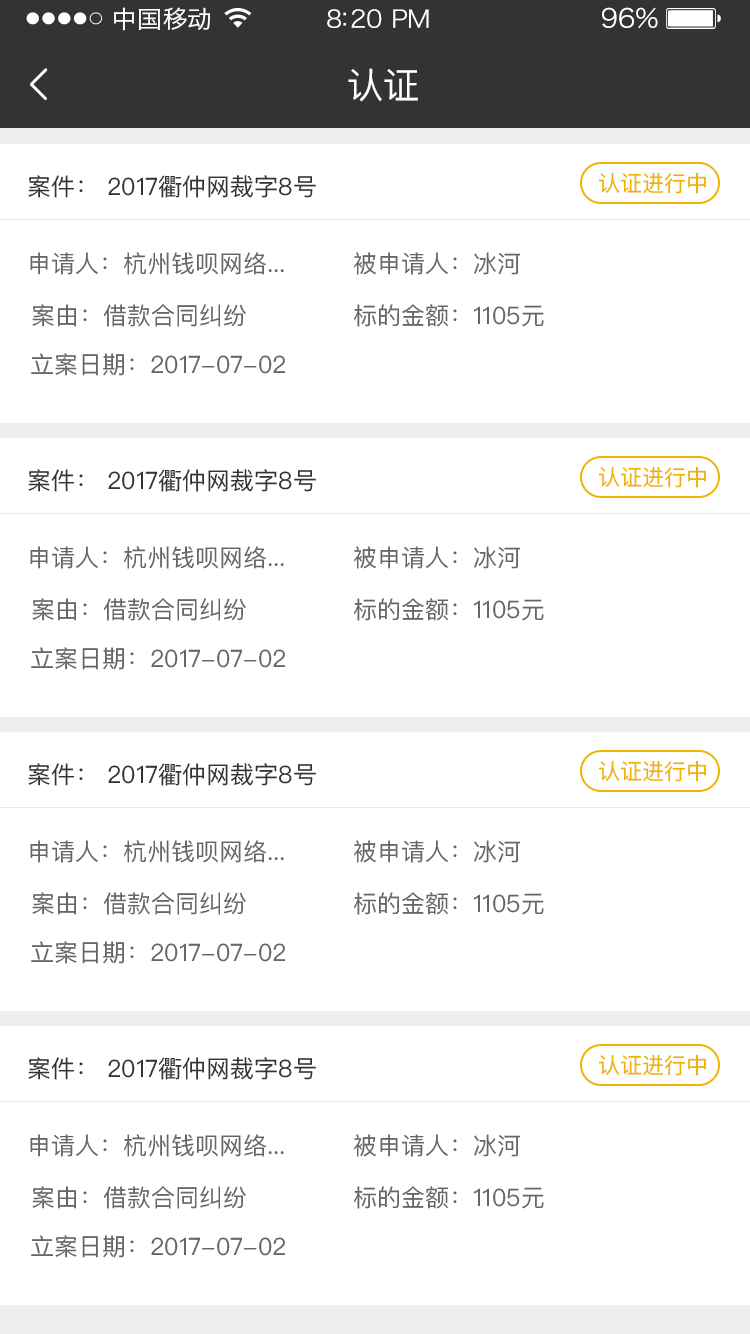
<style>
.page{position:relative;width:750px;height:1334px;background:#ffffff}
.page>*{position:absolute;margin:0}
.t1{font:24px "HiraginoSansGB-W3";letter-spacing:0.02em;color:#ffffff;scale:1.03 1}
.t2{font:24px "HiraginoSansGB-W3";letter-spacing:-0.02em;color:#ffffff;scale:1.03 1}
.t3{font:26.2px "HiraginoSansGB-W3";letter-spacing:-0.02em;color:#ffffff;scale:1.03 1}
.t4{font:36px "PingFangSC-Regular";letter-spacing:-0.02em;color:#ffffff}
.t5{font:22px "PingFangSC-Regular";color:#f0b300}
.t6{font:24px "PingFangSC-Regular";color:#333333}
.t7{font:24px "PingFangSC-Regular";color:#666666}
</style>
<div class="page">
<p class="t1" style="left:114px;top:7px;width:97px;height:24px">中国移动</p>
<p class="t2" style="left:327px;top:9px;width:102px;height:19px">8:20 PM</p>
<p class="t3" style="left:602px;top:7px;width:56px;height:22px">96%</p>
<p class="t4" style="left:348px;top:68px;width:70px;height:34px">认证</p>
<p class="t5" style="left:598px;top:172px;width:108px;height:22px">认证进行中</p>
<p class="t6" style="left:28px;top:175px;width:288px;height:23px">案件： 2017衢仲网裁字8号</p>
<p class="t7" style="left:30px;top:252px;width:254px;height:23px">申请人：杭州钱呗网络...</p>
<p class="t7" style="left:354px;top:252px;width:166px;height:23px">被申请人：冰河</p>
<p class="t7" style="left:32px;top:304px;width:214px;height:23px">案由：借款合同纠纷</p>
<p class="t7" style="left:354px;top:304px;width:190px;height:23px">标的金额：1105元</p>
<p class="t7" style="left:31px;top:353px;width:254px;height:23px">立案日期：2017-07-02</p>
<p class="t6" style="left:28px;top:469px;width:288px;height:23px">案件： 2017衢仲网裁字8号</p>
<p class="t5" style="left:598px;top:466px;width:108px;height:22px">认证进行中</p>
<p class="t7" style="left:30px;top:546px;width:254px;height:23px">申请人：杭州钱呗网络...</p>
<p class="t7" style="left:354px;top:546px;width:166px;height:23px">被申请人：冰河</p>
<p class="t7" style="left:32px;top:598px;width:214px;height:23px">案由：借款合同纠纷</p>
<p class="t7" style="left:354px;top:598px;width:190px;height:23px">标的金额：1105元</p>
<p class="t7" style="left:31px;top:647px;width:254px;height:23px">立案日期：2017-07-02</p>
<p class="t5" style="left:598px;top:760px;width:108px;height:22px">认证进行中</p>
<p class="t6" style="left:28px;top:763px;width:288px;height:23px">案件： 2017衢仲网裁字8号</p>
<p class="t7" style="left:30px;top:840px;width:254px;height:23px">申请人：杭州钱呗网络...</p>
<p class="t7" style="left:354px;top:840px;width:166px;height:23px">被申请人：冰河</p>
<p class="t7" style="left:32px;top:892px;width:214px;height:23px">案由：借款合同纠纷</p>
<p class="t7" style="left:354px;top:892px;width:190px;height:23px">标的金额：1105元</p>
<p class="t7" style="left:31px;top:941px;width:254px;height:23px">立案日期：2017-07-02</p>
<p class="t6" style="left:28px;top:1057px;width:288px;height:23px">案件： 2017衢仲网裁字8号</p>
<p class="t5" style="left:598px;top:1054px;width:108px;height:22px">认证进行中</p>
<p class="t7" style="left:30px;top:1134px;width:254px;height:23px">申请人：杭州钱呗网络...</p>
<p class="t7" style="left:354px;top:1134px;width:166px;height:23px">被申请人：冰河</p>
<p class="t7" style="left:32px;top:1186px;width:214px;height:23px">案由：借款合同纠纷</p>
<p class="t7" style="left:354px;top:1186px;width:190px;height:23px">标的金额：1105元</p>
<p class="t7" style="left:31px;top:1235px;width:254px;height:23px">立案日期：2017-07-02</p>
</div>
